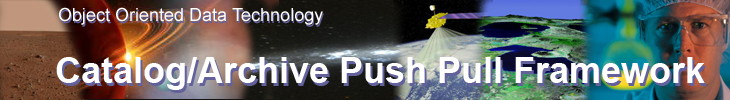
<style>
.page{position:relative;width:730px;height:100px}
.page>*{position:absolute;margin:0}
.t1{font:18px "ArialMT";color:#ffffff}
.t2{font:18px "ArialMT"}
.t3{font:36px "Arial-BoldMT";color:#ffffff}
.t4{font:36px "Arial-BoldMT"}
</style>
<div class="page">
<p class="t1" style="left:59px;top:7px;width:264px;height:18px">Object Oriented Data Technology</p>
<p class="t2" style="left:60px;top:9px;width:264px;height:18px">Object Oriented Data Technology</p>
<p class="t3" style="left:56px;top:57px;width:649px;height:33px">Catalog/Archive Push Pull Framework</p>
<p class="t4" style="left:58px;top:60px;width:649px;height:33px">Catalog/Archive Push Pull Framework</p>
</div>
